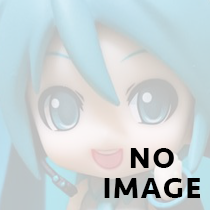
<style>
.page{position:relative;width:210px;height:210px}
.page>*{position:absolute;margin:0}
.t1{font:30px/30px "Seravek-Bold";letter-spacing:0.05em;color:#000000}
</style>
<div class="page">
<p class="t1" style="left:104px;top:148px;width:96px;height:50px;text-align:center">NO<br>IMAGE</p>
</div>
